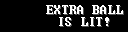
<style>
.page{position:relative;width:128px;height:32px;background:#000000}
.page>*{position:absolute;margin:0}
.t1{font:14px/12px "Terminal";letter-spacing:0.025em;color:#ffffff}
.t2{font:14px/12px "Terminal";letter-spacing:0.025em}
</style>
<div class="page">
<p class="t1" style="left:46px;top:5px;width:77px;height:21px;text-align:center">EXTRA BALL<br>IS LIT!</p>
<p class="t2" style="left:47px;top:6px;width:77px;height:21px;text-align:center">EXTRA BALL<br>IS LIT!</p>
</div>
